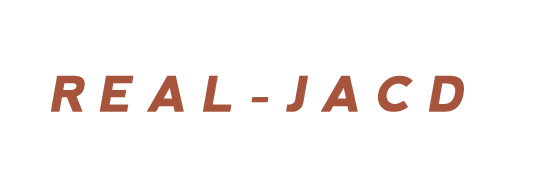
<style>
.page{position:relative;width:538px;height:180px;background:#ffffff}
.page>*{position:absolute;margin:0}
.t1{font:48px "nevis-Bold";letter-spacing:0.3em;color:#a6543b;font-weight:bold;font-style:italic}
</style>
<div class="page">
<p class="t1" style="left:51px;top:75px;width:413px;height:37px">REAL-JACD</p>
</div>
